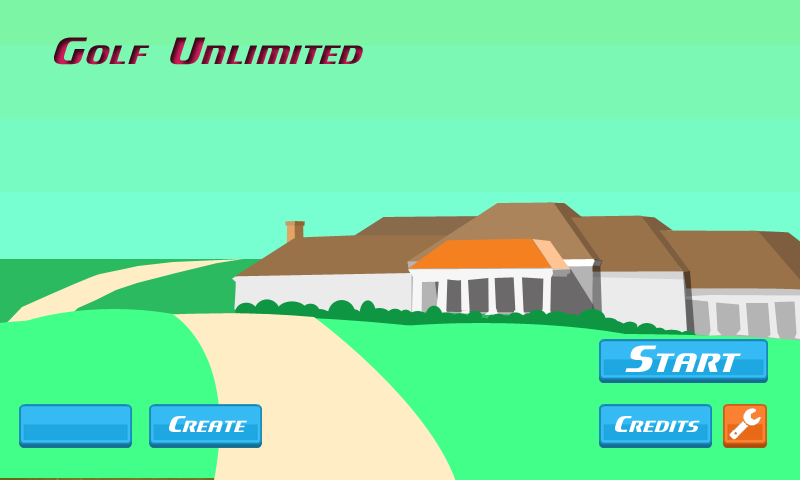
<style>
.page{position:relative;width:800px;height:480px}
.page>*{position:absolute;margin:0}
.t1{font:60px "Motorwerk";color:#ffffff;font-variant:small-caps}
.t2{font:36px "Motorwerk";color:#ffffff;font-variant:small-caps}
</style>
<div class="page">
<p class="t1" style="left:625px;top:345px;width:116px;height:27px">Start</p>
<p class="t2" style="left:169px;top:416px;width:78px;height:16px">Create</p>
<p class="t2" style="left:615px;top:416px;width:85px;height:16px">Credits</p>
</div>
